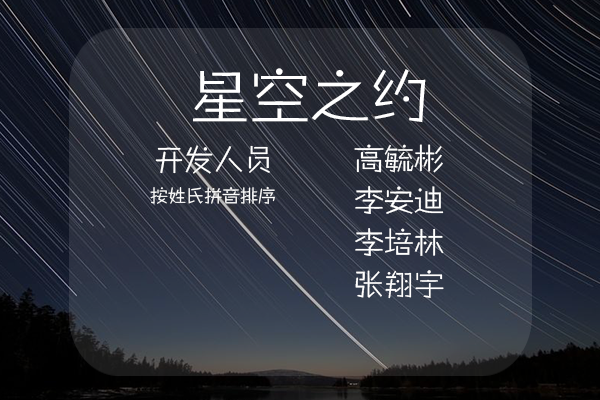
<style>
.page{position:relative;width:600px;height:400px}
.page>*{position:absolute;margin:0}
.t1{font:60px "GJJZHYJW--GB1-0";color:#ffffff}
.t2{font:30px "GJJZHYJW--GB1-0";color:#ffffff}
.t3{font:30px/42px "GJJZHYJW--GB1-0";color:#ffffff}
.t4{font:18px "GJJZHYJW--GB1-0";color:#ffffff}
</style>
<div class="page">
<p class="t1" style="left:193px;top:68px;width:233px;height:55px">星空之约</p>
<p class="t2" style="left:155px;top:145px;width:115px;height:29px">开发人员</p>
<p class="t3" style="left:354px;top:144px;width:90px;height:155px">高毓彬<br>李安迪<br>李培林<br>张翔宇</p>
<p class="t4" style="left:150px;top:186px;width:125px;height:18px">按姓氏拼音排序</p>
</div>
